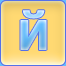
<style>
.page{position:relative;width:66px;height:66px}
.page>*{position:absolute;margin:0}
.t1{font:41px "Tahoma-Bold"}
</style>
<div class="page">
<p class="t1" style="left:20px;top:10px;width:27px;height:40px">Й</p>
<p class="t1" style="left:20px;top:10px;width:27px;height:40px">Й</p>
</div>
